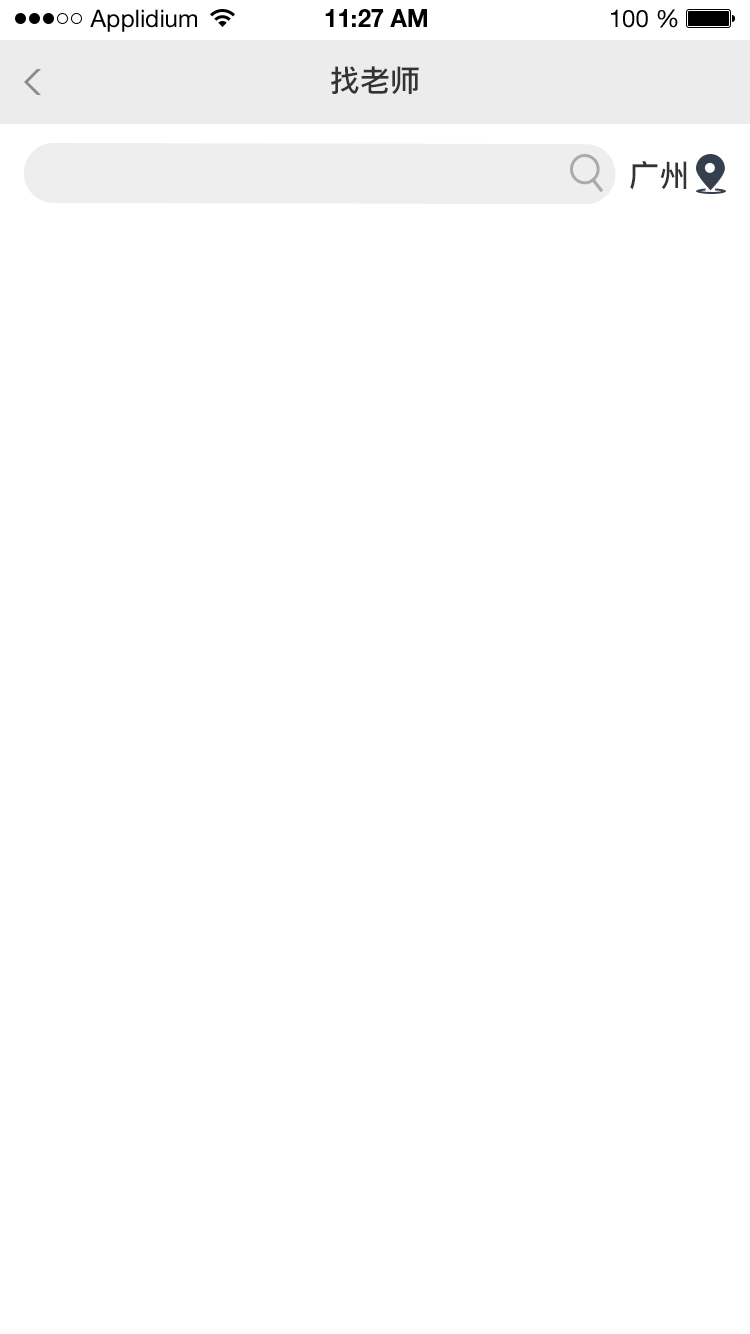
<style>
.page{position:relative;width:750px;height:1334px;background:#ffffff}
.page>*{position:absolute;margin:0}
.t1{font:24px "HelveticaNeueLTStd-Roman";color:#000000}
.t2{font:24px "HelveticaNeueLTStd-Bd";color:#000000}
.t3{font:30px "PingFang-SC-Bold";color:#333333}
</style>
<div class="page">
<p class="t1" style="left:90px;top:9px;width:107px;height:23px">Applidium</p>
<p class="t2" style="left:325px;top:9px;width:102px;height:18px">11:27 AM</p>
<p class="t1" style="left:611px;top:9px;width:67px;height:19px">100 %</p>
<p class="t3" style="left:331px;top:66px;width:88px;height:28px">找老师</p>
<p class="t3" style="left:630px;top:161px;width:57px;height:29px">广州</p>
</div>
